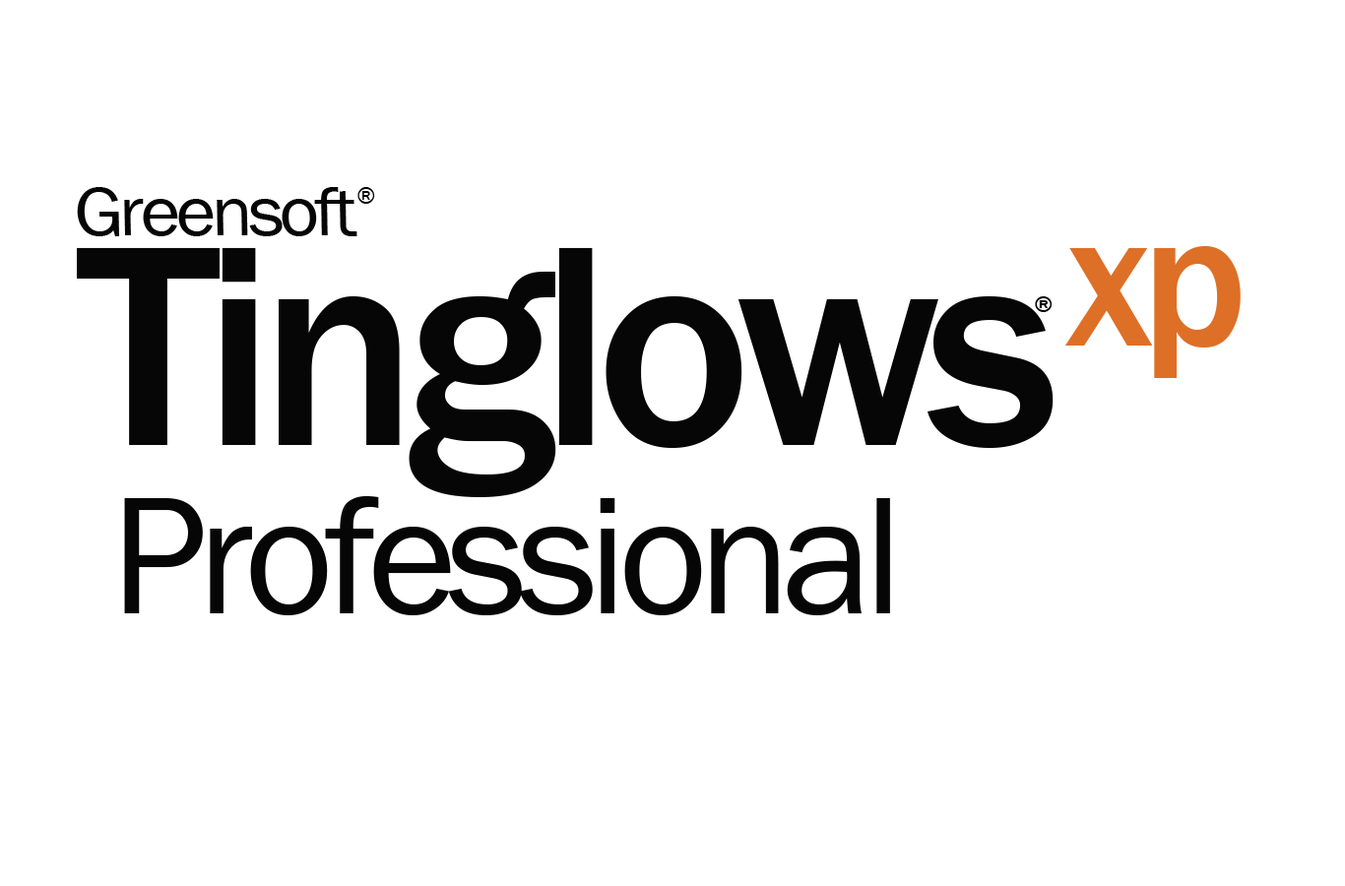
<style>
.page{position:relative;width:1345px;height:886px;background:#ffffff}
.page>*{position:absolute;margin:0}
.t1{font:70.9px "FranklinGothic-Book";color:#070606;scale:1.08 1}
.t2{font:23.6px "FranklinGothic-Book";color:#070606}
.t3{font:295.5px "FranklinGothic-Medium";color:#070606}
.t4{font:197px "FranklinGothic-Medium";color:#de6f27}
.t5{font:23.6px "FranklinGothic-Medium";color:#070606}
.t6{font:172.3px "FranklinGothic-Book";color:#070606}
</style>
<div class="page">
<p class="t1" style="left:77px;top:187px;width:281px;height:49px">Greensoft</p>
<p class="t2" style="left:358px;top:187px;width:17px;height:17px">®</p>
<p class="t3" style="left:77px;top:247px;width:977px;height:250px">Tinglows</p>
<p class="t4" style="left:1065px;top:246px;width:176px;height:132px">xp</p>
<p class="t5" style="left:1035px;top:296px;width:18px;height:16px">®</p>
<p class="t6" style="left:124px;top:496px;width:766px;height:120px">Professional</p>
</div>
